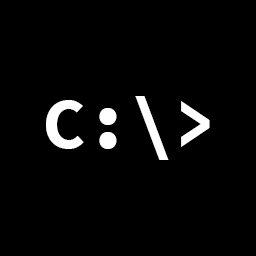
<style>
.page{position:relative;width:256px;height:256px;background:#000000}
.page>*{position:absolute;margin:0}
.t1{font:73.2px "SourceCodePro-Bold";color:#ffffff}
</style>
<div class="page">
<p class="t1" style="left:46px;top:96px;width:164px;height:64px">C:\&gt;</p>
</div>
